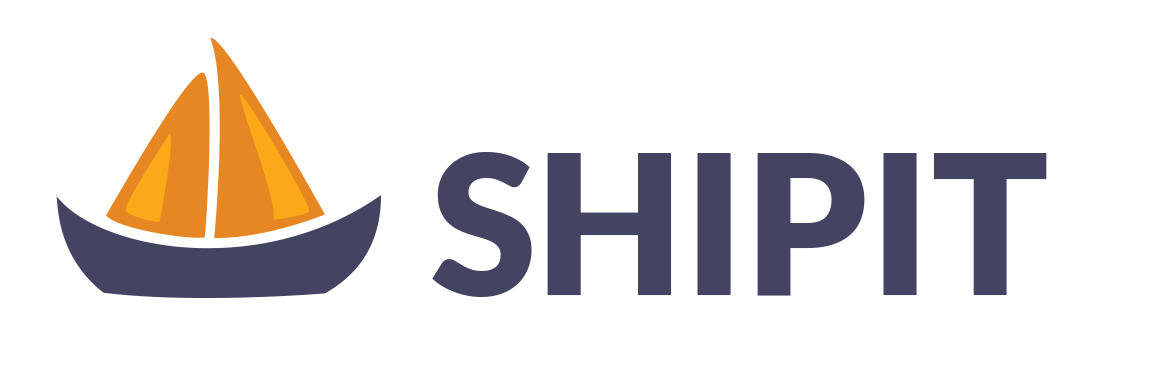
<style>
.page{position:relative;width:1173px;height:392px;background:#ffffff}
.page>*{position:absolute;margin:0}
.t1{font:194.5px "Lato-Black";color:#444361}
</style>
<div class="page">
<p class="t1" style="left:432px;top:152px;width:615px;height:145px">SHIPIT</p>
</div>
